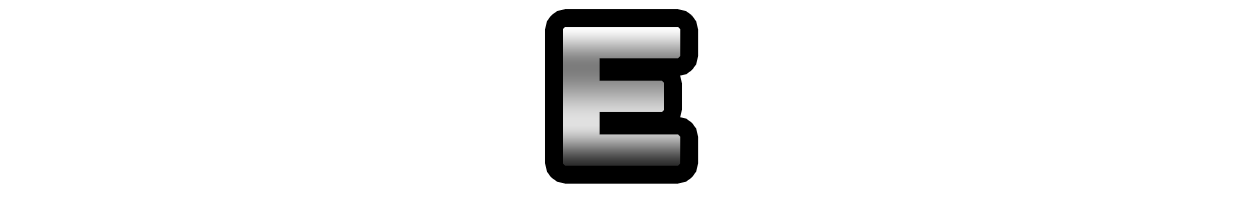
<style>
.page{position:relative;width:1242px;height:198px;background:#ffffff}
.page>*{position:absolute;margin:0}
.t1{font:215px "DOSIyagiMedium";letter-spacing:0.16em;font-weight:bold;scale:1.2 1}
</style>
<div class="page">
<p class="t1" style="left:563px;top:27px;width:118px;height:139px">E</p>
</div>
